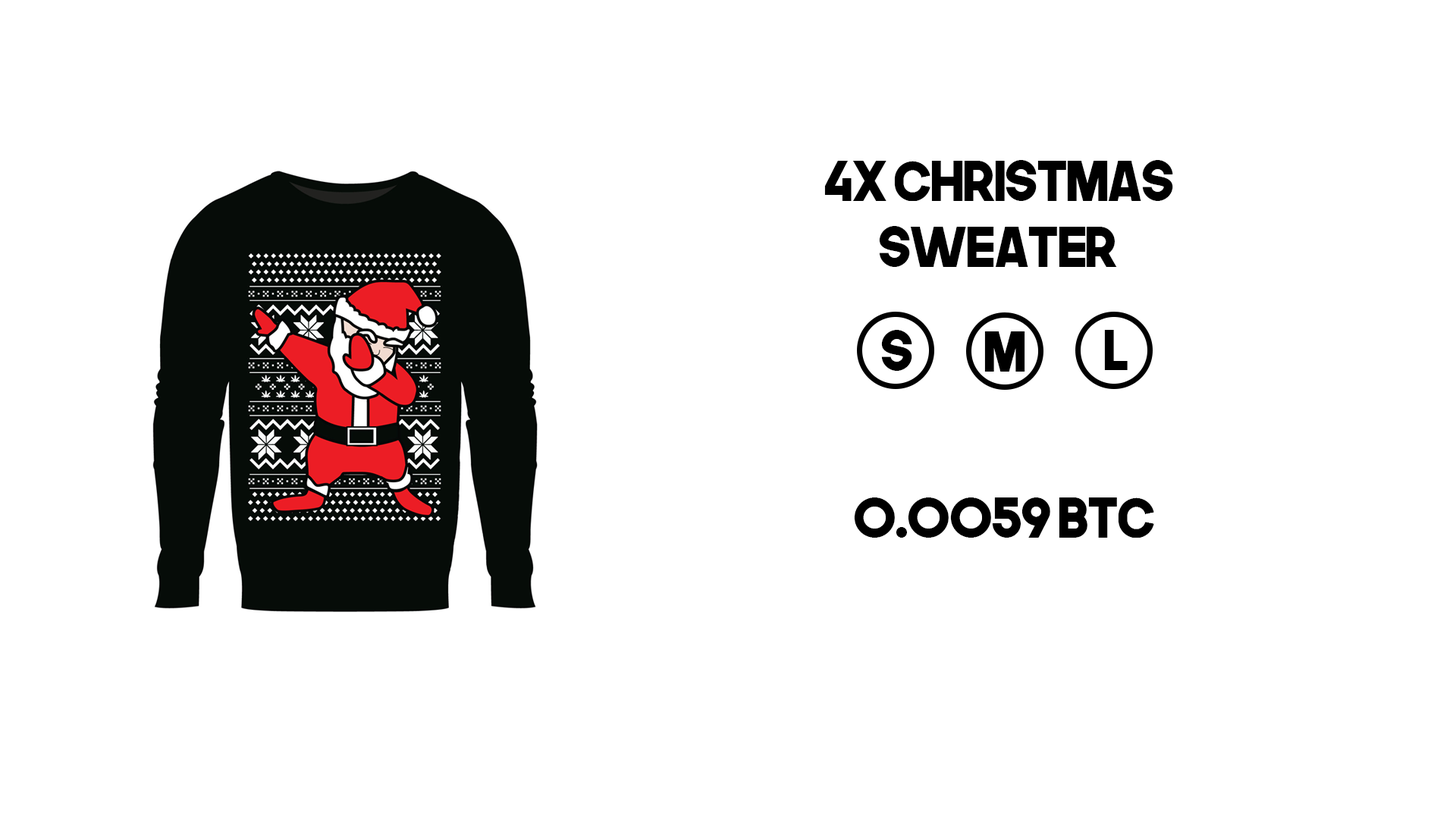
<style>
.page{position:relative;width:1456px;height:819px;background:#ffffff}
.page>*{position:absolute;margin:0}
.t1{font:54.6px "TheNextFont";letter-spacing:-0.05em;color:#000000}
</style>
<div class="page">
<p class="t1" style="left:824px;top:160px;width:349px;height:107px">4x christmas<br>  sweater</p>
<p class="t1" style="left:881px;top:330px;width:31px;height:41px">s</p>
<p class="t1" style="left:1104px;top:330px;width:24px;height:40px">L</p>
<p class="t1" style="left:984px;top:331px;width:41px;height:41px">M</p>
<p class="t1" style="left:854px;top:497px;width:300px;height:41px">0.0059 BTC</p>
</div>
